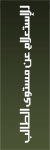
<style>
.page{position:relative;width:50px;height:150px}
.page>*{position:absolute;margin:0}
.t1{font:15px "SC_KHALID";color:#fefefe}
</style>
<div class="page">
<p class="t1" style="left:19px;top:5px;width:15px;height:138px;rotate:-90deg">للإستعلام عن مستوى الطالب</p>
</div>
